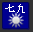
<style>
.page{position:relative;width:33px;height:32px;background:#000090}
.page>*{position:absolute;margin:0}
.t1{font:10.4px "SimSun";color:#ffffff}
</style>
<div class="page">
<p class="t1" style="left:5px;top:4px;width:20px;height:9px">七九</p>
</div>
